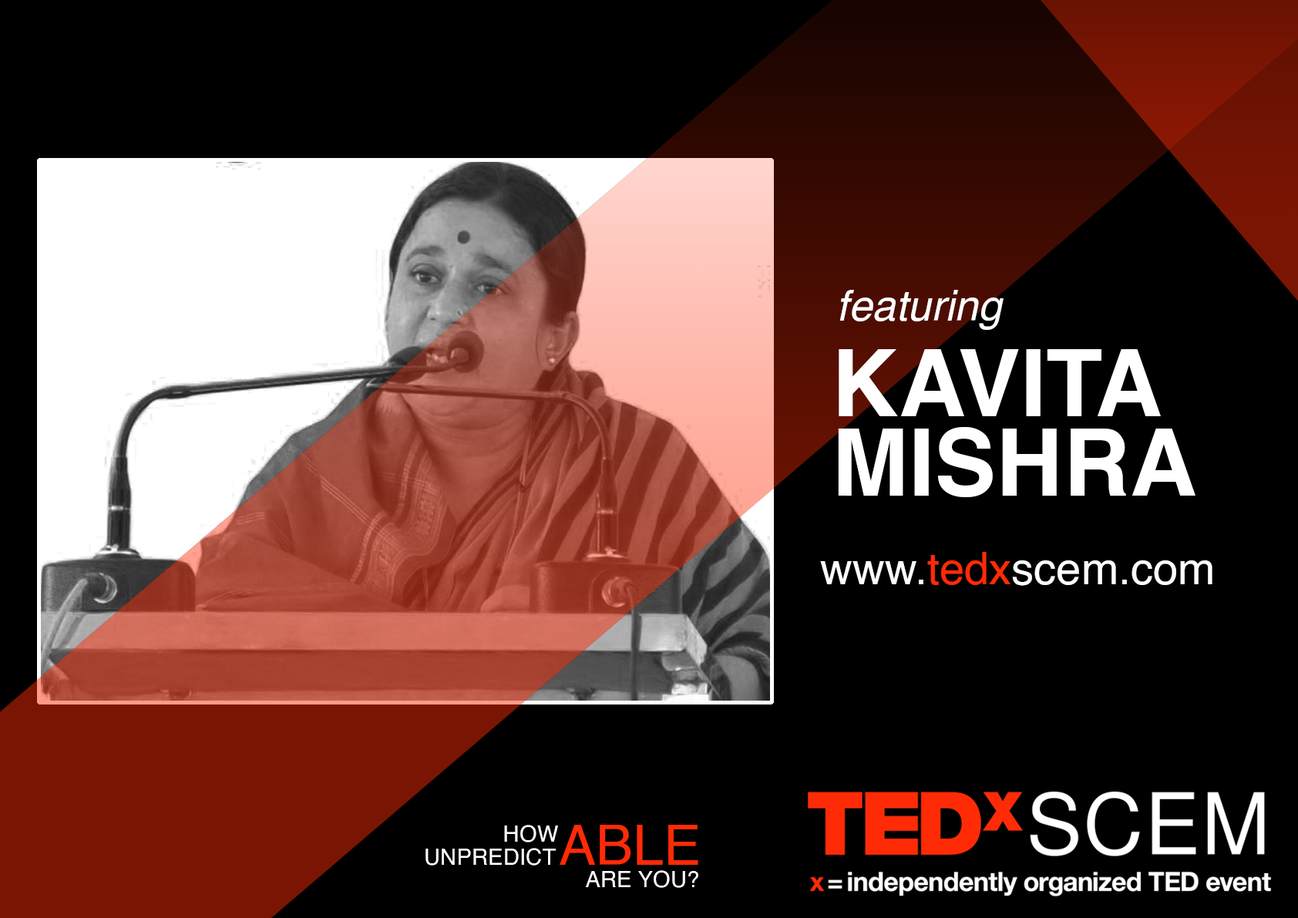
<style>
.page{position:relative;width:1298px;height:918px;background:#000000}
.page>*{position:absolute;margin:0}
.t1{font:42.4px "Helvetica-Oblique";color:#ffffff}
.t2{font:92.5px/49px "Helvetica-Bold";color:#ffffff}
.t3{font:44.7px "Helvetica";color:#fefefe}
.t4{font:44.7px "Helvetica";color:#ff2b06}
.t5{font:22.6px "Helvetica";color:#fefefe}
.t6{font:55.6px "Helvetica";color:#ff2b06}
</style>
<div class="page">
<p class="t1" style="left:840px;top:290px;width:164px;height:40px">featuring</p>
<p class="t2" style="left:838px;top:349px;width:358px;height:148px">KAVITA<br>MISHRA</p>
<p class="t3" style="left:820px;top:552px;width:393px;height:34px">www.<span class="t4">tedx</span>scem.com</p>
<p class="t5" style="left:504px;top:825px;width:54px;height:18px">HOW</p>
<p class="t6" style="left:560px;top:825px;width:139px;height:40px">ABLE</p>
<p class="t5" style="left:426px;top:848px;width:130px;height:18px">UNPREDICT</p>
<p class="t5" style="left:585px;top:871px;width:114px;height:17px">ARE YOU?</p>
</div>
